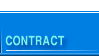
<style>
.page{position:relative;width:99px;height:56px;background:#007fe3}
.page>*{position:absolute;margin:0}
.t1{font:12px "H2gtrE";letter-spacing:-0.025em;color:#7ff2e9;font-weight:bold;scale:0.8 1}
</style>
<div class="page">
<p class="t1" style="left:5px;top:35px;width:60px;height:11px">CONTRACT</p>
</div>
